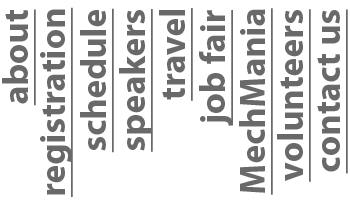
<style>
.page{position:relative;width:350px;height:205px;background:#ffffff}
.page>*{position:absolute;margin:0}
.t1{font:36px "MyriadPro-Bold";color:#696969;text-decoration:underline}
</style>
<div class="page">
<p class="t1" style="left:2px;top:9px;width:34px;height:97px;rotate:-90deg">about</p>
<p class="t1" style="left:40px;top:7px;width:33px;height:190px;rotate:-90deg">registration</p>
<p class="t1" style="left:80px;top:8px;width:34px;height:145px;rotate:-90deg">schedule</p>
<p class="t1" style="left:119px;top:9px;width:34px;height:143px;rotate:-90deg">speakers</p>
<p class="t1" style="left:159px;top:8px;width:34px;height:93px;rotate:-90deg">travel</p>
<p class="t1" style="left:199px;top:10px;width:34px;height:116px;rotate:-90deg">job fair</p>
<p class="t1" style="left:239px;top:8px;width:34px;height:187px;rotate:-90deg">MechMania</p>
<p class="t1" style="left:277px;top:9px;width:34px;height:173px;rotate:-90deg">volunteers</p>
<p class="t1" style="left:317px;top:9px;width:31px;height:165px;rotate:-90deg">contact us</p>
</div>
